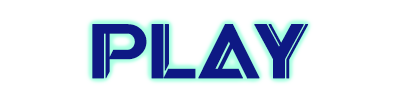
<style>
.page{position:relative;width:400px;height:100px;background:#ffffff}
.page>*{position:absolute;margin:0}
.t1{font:75px "SweraDemoShadowed";color:#0e1984;font-weight:bold}
</style>
<div class="page">
<p class="t1" style="left:92px;top:24px;width:217px;height:55px">Play</p>
</div>
